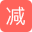
<style>
.page{position:relative;width:32px;height:32px;background:#ff635b}
.page>*{position:absolute;margin:0}
.t1{font:20px "PingFang-SC-Regular";color:#ffffff}
</style>
<div class="page">
<p class="t1" style="left:6px;top:6px;width:19px;height:19px">减</p>
</div>
